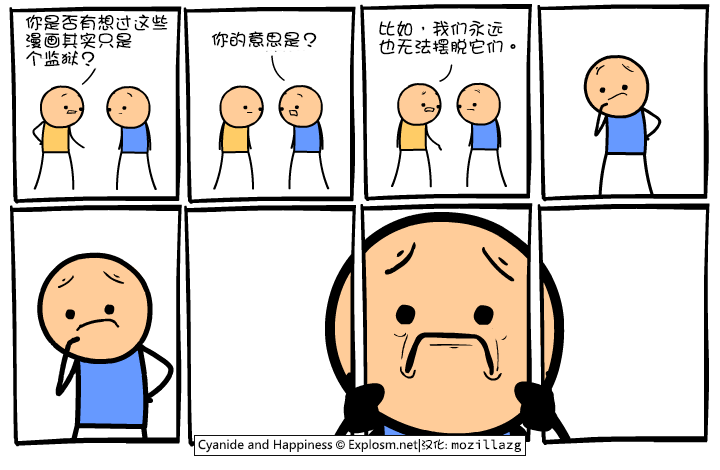
<style>
.page{position:relative;width:720px;height:470px;background:#ffffff}
.page>*{position:absolute;margin:0}
.t1{font:18px/18px "DFGirl";color:#000000}
.t2{font:18px "DFGirl";color:#000000}
</style>
<div class="page">
<p class="t1" style="left:25px;top:14px;width:143px;height:53px">你是否有想过这些<br>漫画其实只是<br>个监狱？</p>
<p class="t1" style="left:379px;top:20px;width:137px;height:35px">比如，我们永远<br>也无法摆脱它们。</p>
<p class="t2" style="left:211px;top:31px;width:106px;height:17px">你的意思是？</p>
</div>
